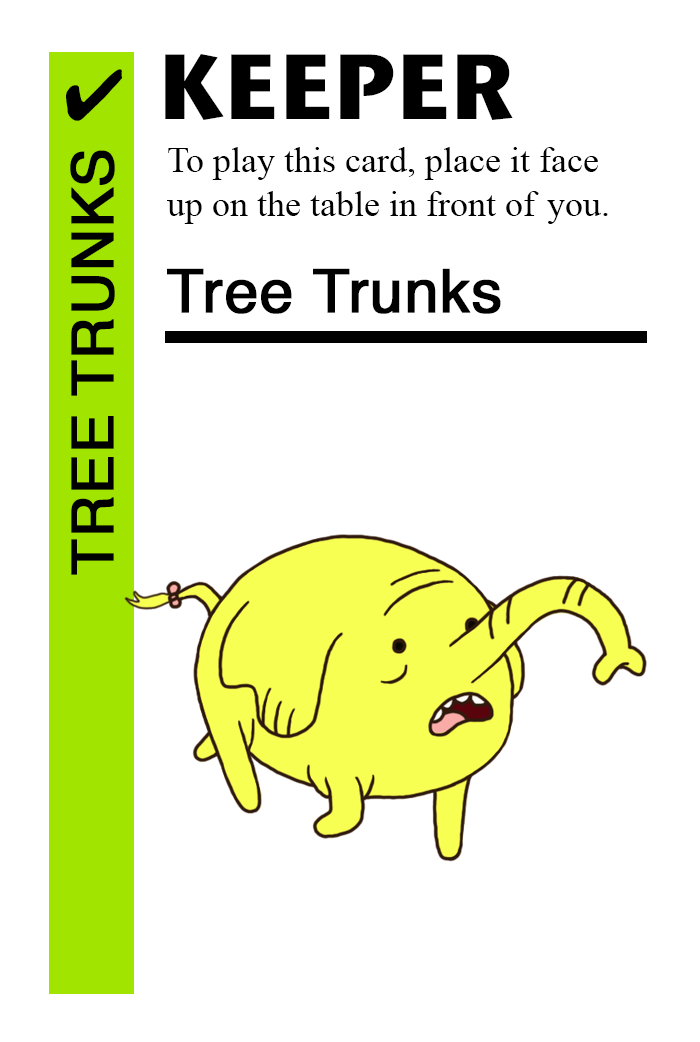
<style>
.page{position:relative;width:700px;height:1042px;background:#ffffff}
.page>*{position:absolute;margin:0}
.t1{font:92px "StoneSansITC-Bold";color:#000000}
.t2{font:72px "MS-Gothic";color:#000000}
.t3{font:58px "Helvetica";color:#000000;font-weight:bold}
.t4{font:36px "TimesNewRomanPSMT";color:#000000}
.t5{font:60px "Helvetica";color:#000000;font-weight:bold}
</style>
<div class="page">
<p class="t1" style="left:165px;top:54px;width:348px;height:66px">KEEPER</p>
<p class="t2" style="left:66px;top:69px;width:56px;height:52px">✔</p>
<p class="t3" style="left:70px;top:150px;width:45px;height:425px;rotate:-90deg">TREE TRUNKS</p>
<p class="t4" style="left:167px;top:147px;width:441px;height:77px">To play this card, place it face<br>up on the table in front of you.</p>
<p class="t5" style="left:167px;top:268px;width:334px;height:46px">Tree Trunks</p>
</div>
